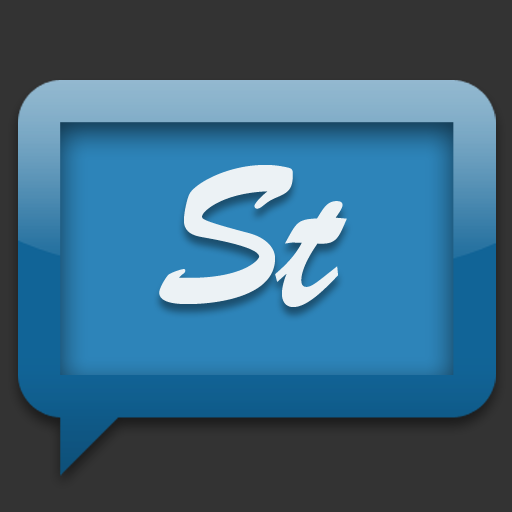
<style>
.page{position:relative;width:512px;height:512px;background:#333333}
.page>*{position:absolute;margin:0}
.t1{font:197.3px "BrushScriptStd";color:#ecf2f5;scale:0.9 1}
</style>
<div class="page">
<p class="t1" style="left:159px;top:165px;width:188px;height:142px">St</p>
</div>
